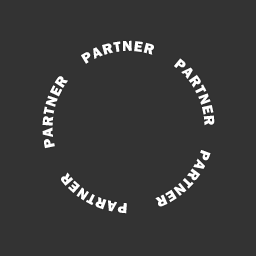
<style>
.page{position:relative;width:256px;height:256px;background:#333333}
.page>*{position:absolute;margin:0}
.t1{font:15px "FranklinGothic-Heavy";letter-spacing:0.05em;color:#ffffff}
</style>
<div class="page">
<p class="t1" style="left:42px;top:40px;width:173px;height:174px;rotate:180deg">PARTNER      PARTNER     PARTNER     PARTNER     PARTNER</p>
</div>
